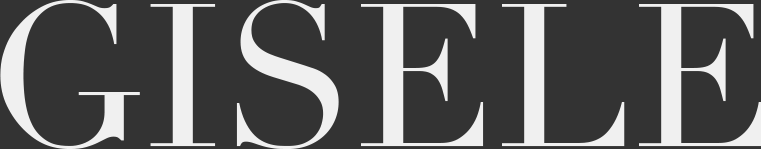
<style>
.page{position:relative;width:761px;height:149px;background:#333333}
.page>*{position:absolute;margin:0}
.t1{font:200px "Didot";color:#f0f0f0}
</style>
<div class="page">
<p class="t1" style="left:0px;top:0px;width:761px;height:149px">GISELE</p>
</div>
